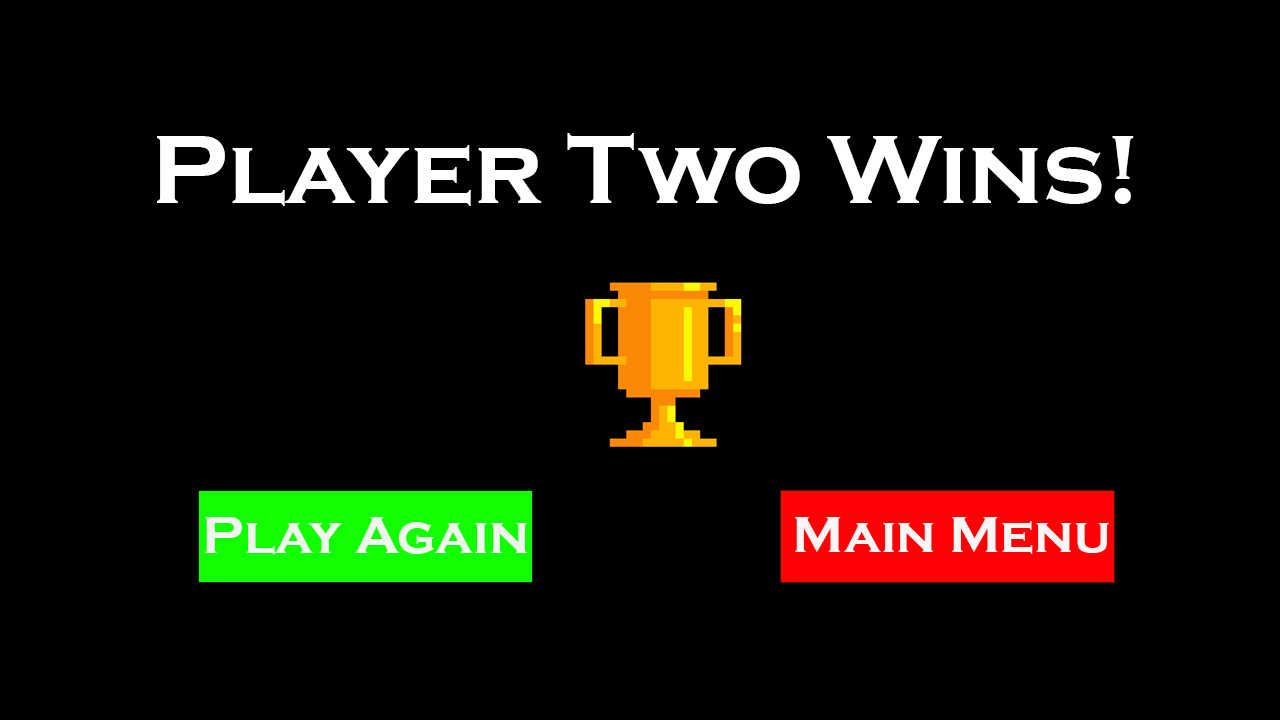
<style>
.page{position:relative;width:1280px;height:720px;background:#000000}
.page>*{position:absolute;margin:0}
.t1{font:100px "CopperplateGothic-Bold";color:#ffffff}
.t2{font:54.2px "CopperplateGothic-Bold";color:#f0f5ef}
.t3{font:53.1px "CopperplateGothic-Bold";color:#fbf6f6}
</style>
<div class="page">
<p class="t1" style="left:157px;top:133px;width:977px;height:73px">Player Two Wins!</p>
<p class="t2" style="left:205px;top:517px;width:322px;height:38px">Play Again</p>
<p class="t3" style="left:795px;top:517px;width:314px;height:37px">Main Menu</p>
</div>
